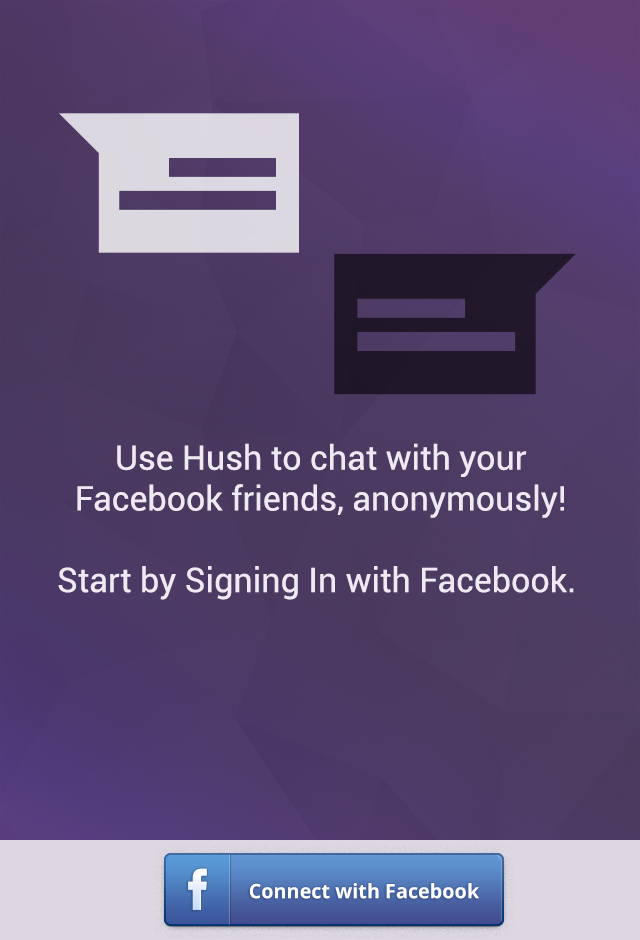
<style>
.page{position:relative;width:640px;height:940px}
.page>*{position:absolute;margin:0}
.t1{font:34px "Roboto-Regular";color:#eee9f3}
.t2{font:20px "OpenSans-Bold";color:#ffffff}
</style>
<div class="page">
<p class="t1" style="left:58px;top:443px;width:516px;height:157px;text-align:center">Use Hush to chat with your<br>Facebook friends, anonymously!<br><br>Start by Signing In with Facebook.</p>
<p class="t2" style="left:250px;top:883px;width:230px;height:16px">Connect with Facebook</p>
</div>
